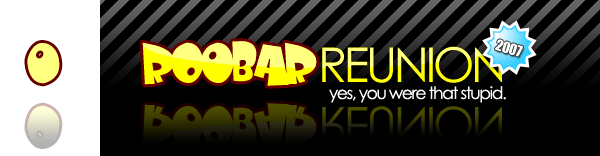
<style>
.page{position:relative;width:600px;height:156px;background:#000000}
.page>*{position:absolute;margin:0}
.t1{font:48px "BabyKruffy";letter-spacing:0.01em}
.t2{font:14px "Impact";letter-spacing:-0.025em;color:#ffffff}
.t3{font:48px "CenturyGothic";letter-spacing:-0.075em}
.t4{font:17px "CenturyGothic";letter-spacing:-0.075em;color:#ffffff}
</style>
<div class="page">
<p class="t1" style="left:142px;top:41px;width:175px;height:45px">ROOBAR</p>
<p class="t2" style="left:495px;top:39px;width:28px;height:18px;rotate:17deg">2007</p>
<p class="t3" style="left:322px;top:46px;width:180px;height:37px">REUNION</p>
<p class="t4" style="left:329px;top:86px;width:177px;height:17px">yes, you were that stupid.</p>
</div>
